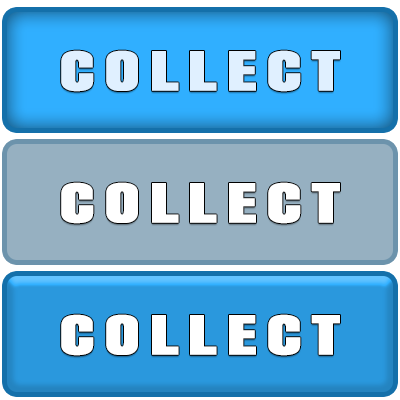
<style>
.page{position:relative;width:400px;height:400px;background:#96b0c1}
.page>*{position:absolute;margin:0}
.t1{font:50px "Anton";letter-spacing:0.125em;color:#e0f0ff;font-weight:bold;scale:1.41 1}
.t2{font:50px "Anton";letter-spacing:0.125em;color:#ffffff;font-weight:bold;scale:1.41 1}
</style>
<div class="page">
<p class="t1" style="left:61px;top:50px;width:279px;height:42px">COLLECT</p>
<p class="t2" style="left:61px;top:182px;width:279px;height:42px">COLLECT</p>
<p class="t2" style="left:61px;top:314px;width:279px;height:42px">COLLECT</p>
</div>
